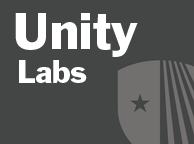
<style>
.page{position:relative;width:194px;height:144px;background:#444545}
.page>*{position:absolute;margin:0}
.t1{font:48px "FranklinGothicStd-Roman";color:#ffffff}
.t2{font:30px "FranklinGothicStd-Roman";color:#ffffff}
</style>
<div class="page">
<p class="t1" style="left:15px;top:13px;width:123px;height:44px">Unity</p>
<p class="t2" style="left:19px;top:60px;width:68px;height:23px">Labs</p>
</div>
